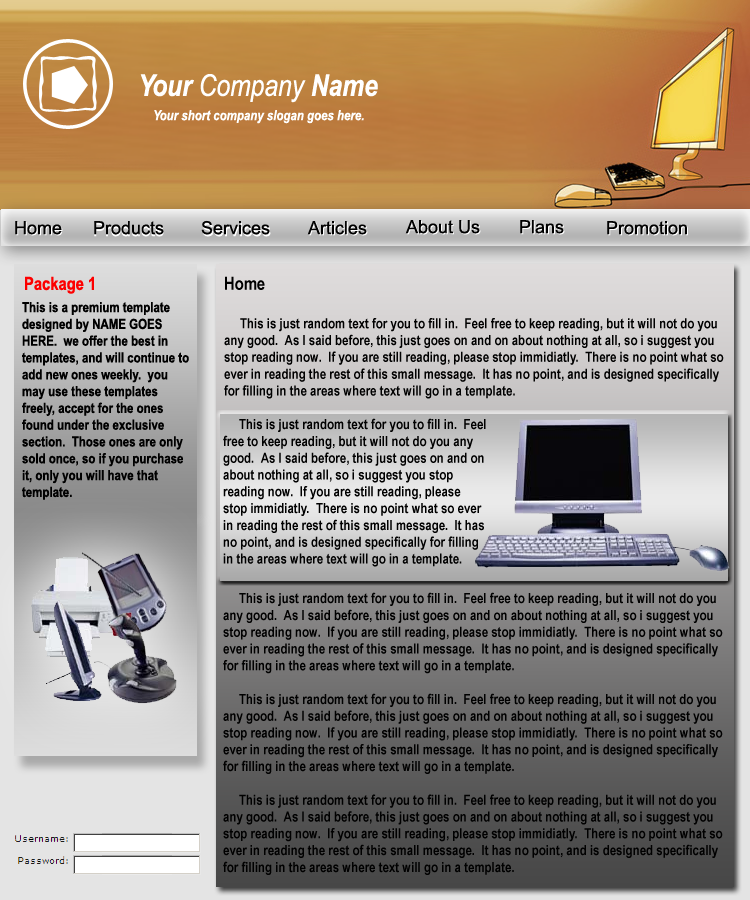
<style>
.page{position:relative;width:750px;height:900px}
.page>*{position:absolute;margin:0}
.t1{font:30px "ArialNarrow-Italic";color:#ffffff}
.t2{font:30px "ArialNarrow-BoldItalic";color:#ffffff}
.t3{font:14px "ArialNarrow-BoldItalic";color:#ffffff}
.t4{font:18px "ArialMT";color:#000000}
.t5{font:18px "ArialNarrow-Bold";color:#fd0000}
.t6{font:14px "ArialNarrow-Bold";color:#000000}
.t7{font:18px "ArialNarrow-Bold";color:#000000}
</style>
<div class="page">
<p class="t1" style="left:140px;top:74px;width:238px;height:29px"><span class="t2">Your </span>Company <span class="t2">Name</span></p>
<p class="t3" style="left:154px;top:110px;width:210px;height:14px">Your short company slogan goes here.</p>
<p class="t4" style="left:15px;top:221px;width:47px;height:14px">Home</p>
<p class="t4" style="left:94px;top:221px;width:70px;height:14px">Products</p>
<p class="t4" style="left:201px;top:220px;width:69px;height:15px">Services</p>
<p class="t4" style="left:307px;top:221px;width:60px;height:14px">Articles</p>
<p class="t4" style="left:405px;top:220px;width:75px;height:14px">About Us</p>
<p class="t4" style="left:520px;top:220px;width:44px;height:14px">Plans</p>
<p class="t4" style="left:607px;top:221px;width:80px;height:14px">Promotion</p>
<p class="t5" style="left:25px;top:276px;width:69px;height:18px">Package 1</p>
<p class="t6" style="left:224px;top:276px;width:500px;height:123px"><span class="t7">Home<br><br></span>     This is just random text for you to fill in.  Feel free to keep reading, but it will not do you any good.  As I said before, this just goes on and on about nothing at all, so i suggest you stop reading now.  If you are still reading, please stop immidiatly.  There is no point what so ever in reading the rest of this small message.  It has no point, and is designed specifically for filling in the areas where text will go in a template.</p>
<p class="t6" style="left:22px;top:302px;width:167px;height:198px">This is a premium template designed by NAME GOES HERE.  we offer the best in templates, and will continue to add new ones weekly.  you may use these templates freely, accept for the ones found under the exclusive section.  Those ones are only sold once, so if you purchase it, only you will have that template.</p>
<p class="t6" style="left:223px;top:418px;width:263px;height:149px">This is just random text for you to fill in.  Feel free to keep reading, but it will not do you any good.  As I said before, this just goes on and on about nothing at all, so i suggest you stop reading now.  If you are still reading, please stop immidiatly.  There is no point what so ever in reading the rest of this small message.  It has no point, and is designed specifically for filling in the areas where text will go in a template.</p>
<p class="t6" style="left:223px;top:592px;width:500px;height:283px">This is just random text for you to fill in.  Feel free to keep reading, but it will not do you any good.  As I said before, this just goes on and on about nothing at all, so i suggest you stop reading now.  If you are still reading, please stop immidiatly.  There is no point what so ever in reading the rest of this small message.  It has no point, and is designed specifically for filling in the areas where text will go in a template.<br><br>     This is just random text for you to fill in.  Feel free to keep reading, but it will not do you any good.  As I said before, this just goes on and on about nothing at all, so i suggest you stop reading now.  If you are still reading, please stop immidiatly.  There is no point what so ever in reading the rest of this small message.  It has no point, and is designed specifically for filling in the areas where text will go in a template.<br><br>     This is just random text for you to fill in.  Feel free to keep reading, but it will not do you any good.  As I said before, this just goes on and on about nothing at all, so i suggest you stop reading now.  If you are still reading, please stop immidiatly.  There is no point what so ever in reading the rest of this small message.  It has no point, and is designed specifically for filling in the areas where text will go in a template.</p>
</div>
